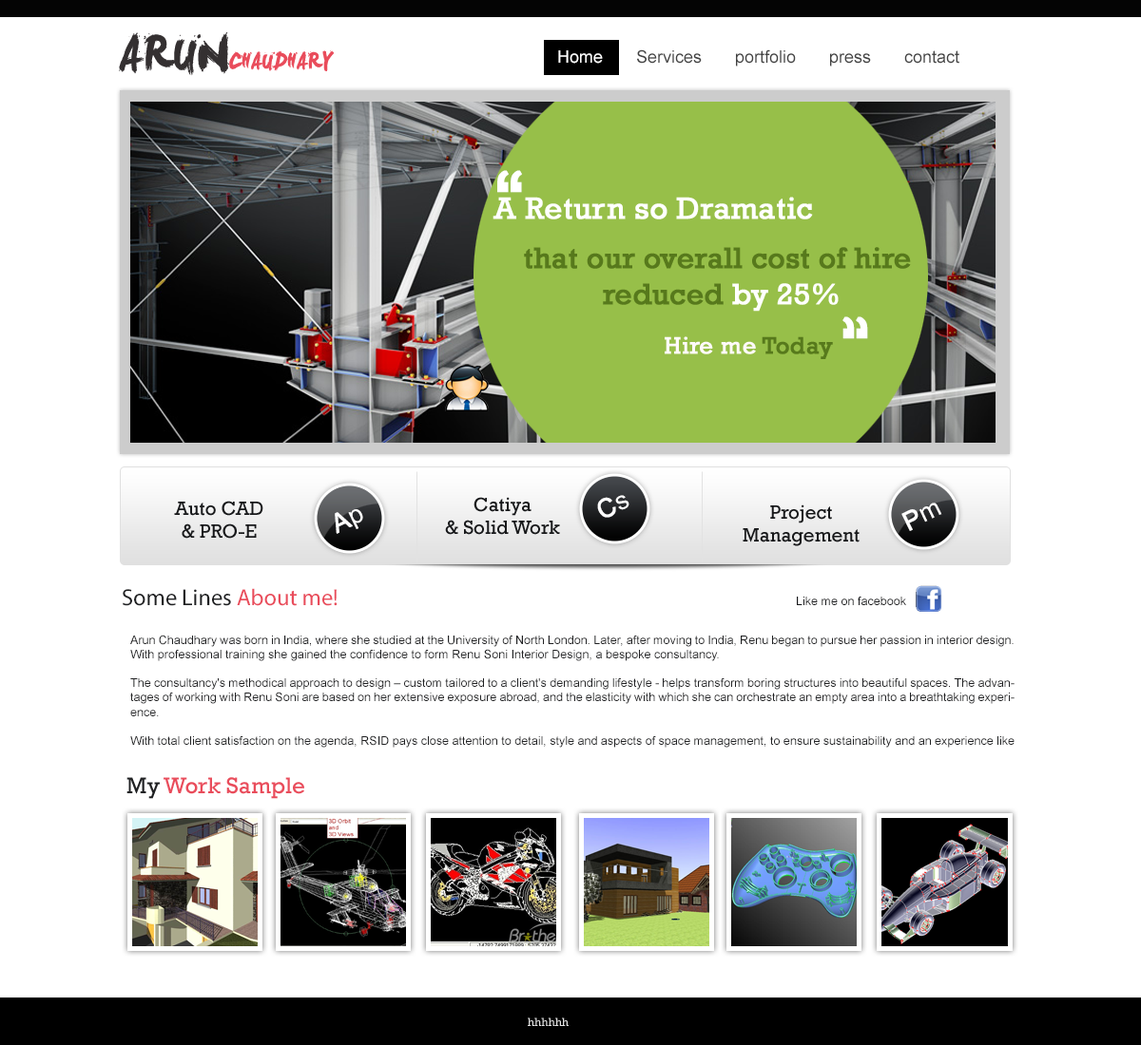
<style>
.page{position:relative;width:1141px;height:1045px;background:#ffffff}
.page>*{position:absolute;margin:0}
.t1{font:46.2px "LeviBrush";color:#343031;text-transform:uppercase}
.t2{font:21.4px "LeviBrush";color:#e94d5b;text-transform:uppercase}
.t3{font:17.1px "ArialMT";color:#434343}
.t4{font:17.1px "ArialMT";color:#ffffff}
.t5{font:86.9px "ArialMT";color:#ffffff;font-weight:bold}
.t6{font:31.2px "Rockwell";color:#ffffff;font-weight:bold}
.t7{font:29.9px "Rockwell";color:#57791c;font-weight:bold}
.t8{font:29.9px "Rockwell";color:#ffffff;font-weight:bold}
.t9{font:24.2px "Rockwell";color:#fffafa;font-weight:bold}
.t10{font:24.2px "Rockwell";color:#57791c;font-weight:bold}
.t11{font:19.6px "Rockwell";color:#17181a}
.t12{font:25.6px "ArialMT";color:#ffffff;font-weight:bold}
.t13{font:25.6px "ArialMT";color:#ffffff}
.t14{font:23.1px "MyriadPro-Regular";color:#1f2022}
.t15{font:23.1px "MyriadPro-Regular";color:#e94c5b}
.t16{font:12px "ArialMT";color:#17181a}
.t17{font:12px "ArialMT";color:#1f2022}
.t18{font:23.1px "Rockwell";color:#e94c5b}
.t19{font:23.1px "Rockwell";color:#1f2022}
.t20{font:12px "Rockwell";color:#e2e2e2}
</style>
<div class="page">
<p class="t1" style="left:119px;top:31px;width:110px;height:45px">Arun</p>
<p class="t2" style="left:229px;top:50px;width:106px;height:21px">Chaudhary</p>
<p class="t3" style="left:558px;top:49px;width:401px;height:18px"><span class="t4">Home </span>      Services       portfolio       press       contact</p>
<p class="t5" style="left:497px;top:170px;width:25px;height:23px">“</p>
<p class="t6" style="left:492px;top:197px;width:321px;height:23px">A Return so Dramatic</p>
<p class="t7" style="left:524px;top:247px;width:387px;height:65px;text-align:center">that our overall cost of hire<br> reduced <span class="t8">by 25%</span></p>
<p class="t5" style="left:842px;top:317px;width:26px;height:22px;rotate:180deg">“</p>
<p class="t9" style="left:664px;top:336px;width:169px;height:23px">Hire me <span class="t10">Today</span></p>
<p class="t11" style="left:445px;top:497px;width:115px;height:38px;text-align:center">Catiya<br>&amp; Solid Work</p>
<p class="t12" style="left:597px;top:495px;width:32px;height:23px;rotate:-26deg">C<span class="t13">s</span></p>
<p class="t11" style="left:174px;top:501px;width:89px;height:38px;text-align:center">Auto CAD<br>&amp; PRO-E</p>
<p class="t12" style="left:335px;top:509px;width:28px;height:25px;rotate:-26deg">A<span class="t13">p</span></p>
<p class="t11" style="left:742px;top:505px;width:117px;height:42px;text-align:center">Project<br>Management</p>
<p class="t12" style="left:901px;top:503px;width:41px;height:28px;rotate:-26deg">P<span class="t13">m</span></p>
<p class="t14" style="left:123px;top:588px;width:214px;height:18px">Some Lines <span class="t15">About me!</span></p>
<p class="t16" style="left:796px;top:597px;width:110px;height:8px">Like me on facebook</p>
<p class="t17" style="left:130px;top:635px;width:884px;height:113px;text-align:justify">Arun Chaudhary was born in India, where she studied at the University of North London. Later, after moving to India, Renu began to pursue her passion in interior design. With professional training she gained the confidence to form Renu Soni Interior Design, a bespoke consultancy.<br><br>The consultancy's methodical approach to design – custom tailored to a client's demanding lifestyle - helps transform boring structures into beautiful spaces. The advantages of working with Renu Soni are based on her extensive exposure abroad, and the elasticity with which she can orchestrate an empty area into a breathtaking experience. <br><br>With total client satisfaction on the agenda, RSID pays close attention to detail, style and aspects of space management, to ensure sustainability and an experience like no other</p>
<p class="t18" style="left:126px;top:777px;width:178px;height:22px"><span class="t19">My </span>Work Sample</p>
<p class="t20" style="left:528px;top:1018px;width:40px;height:8px">hhhhhh</p>
</div>
